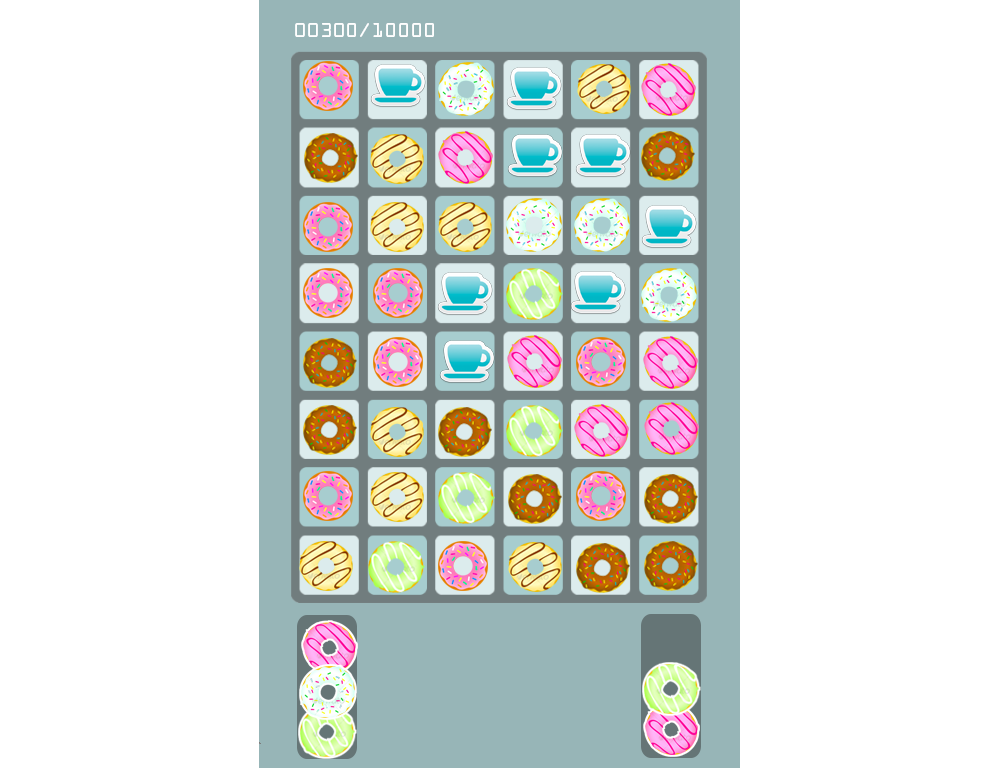
<style>
.page{position:relative;width:1000px;height:768px;background:#ffffff}
.page>*{position:absolute;margin:0}
.t1{font:18px "OCRAStd";color:#ffffff}
</style>
<div class="page">
<p class="t1" style="left:295px;top:23px;width:139px;height:14px">00300/10000</p>
</div>
